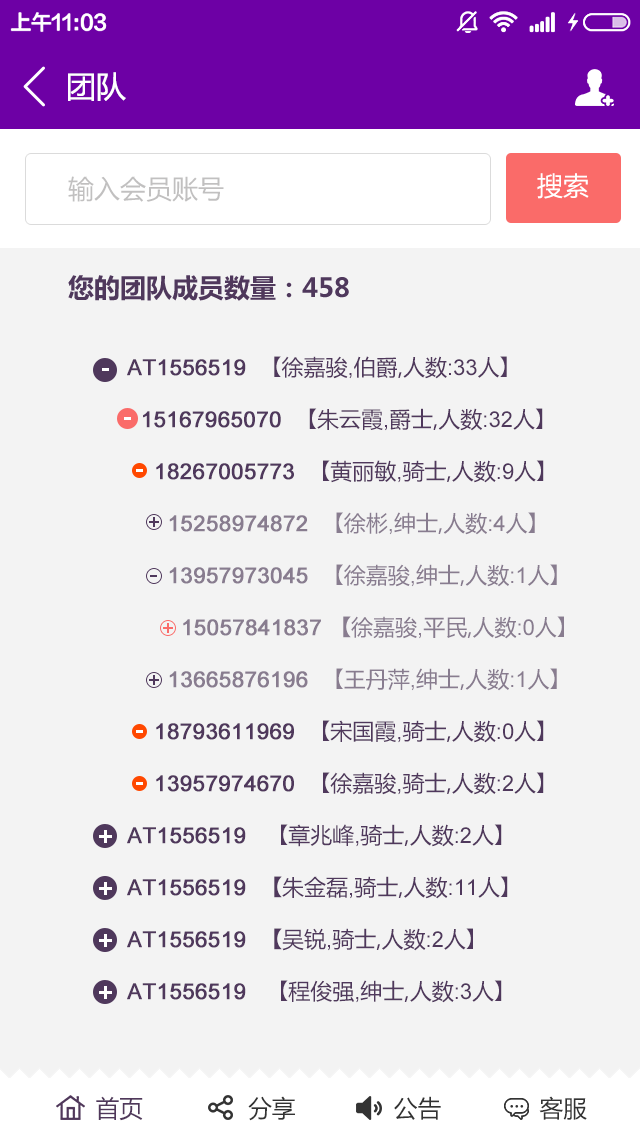
<style>
.page{position:relative;width:640px;height:1136px;background:#f3f3f3}
.page>*{position:absolute;margin:0}
.t1{font:30px "MicrosoftYaHei";color:#ffffff}
.t2{font:26px "MicrosoftYaHei";color:#ffffff}
.t3{font:26px "MicrosoftYaHei";color:#c1c0c0}
.t4{font:26px "Î¢ÈíÑÅºÚ83¹«ÉçÌØ±ð°æ\BBS.83GS.CN-B";color:#4f385c}
.t5{font:22px/52px "ArialMT";color:#4f385c;font-weight:bold}
.t6{font:22px/52px "AdobeHeitiStd-Regular";color:#4f385c}
.t7{font:22px/52px "MicrosoftYaHei";color:#4f385c}
.t8{font:22px/52px "ArialMT";color:#4f385c}
.t9{font:22px/52px "ArialMT";color:#887c8f;font-weight:bold}
.t10{font:22px/52px "AdobeHeitiStd-Regular";color:#887c8f}
.t11{font:22px/52px "MicrosoftYaHei";color:#887c8f}
.t12{font:22px/52px "ArialMT";color:#887c8f}
.t13{font:22px/52px "AdobeHeitiStd-Regular";color:#887c8f;font-weight:bold}
.t14{font:22px/52px "AdobeHeitiStd-Regular";color:#4f385c;font-weight:bold}
.t15{font:22px/43.5px "MicrosoftYaHei";color:#ffffff;font-weight:bold}
.t16{font:22px/51.5px "MicrosoftYaHei";color:#ffffff;font-weight:bold}
.t17{font:20px "MicrosoftYaHei";color:#4f385c;font-weight:bold}
.t18{font:20px "MicrosoftYaHei";color:#fa6b69;font-weight:bold}
.t19{font:24px "MicrosoftYaHei";color:#333333}
.t20{font:24px "MicrosoftYaHei";color:#50385b}
</style>
<div class="page">
<p class="t1" style="left:68px;top:72px;width:58px;height:29px">团队</p>
<p class="t2" style="left:537px;top:173px;width:52px;height:26px">搜索</p>
<p class="t3" style="left:68px;top:176px;width:156px;height:26px">输入会员账号</p>
<p class="t4" style="left:68px;top:275px;width:281px;height:26px">您的团队成员数量：458</p>
<p class="t5" style="left:127px;top:356px;width:437px;height:647px">AT1556519  <span class="t6">【</span><span class="t7">徐嘉骏</span><span class="t8">,</span><span class="t7">伯爵,人数</span><span class="t8">:33</span><span class="t7">人</span><span class="t6">】<br></span>  15167965070  <span class="t6">【</span><span class="t7">朱云霞</span><span class="t8">,</span><span class="t7">爵士,人数</span><span class="t8">:32</span><span class="t7">人</span><span class="t6">】<br></span>    18267005773  <span class="t6">【</span><span class="t7">黄丽敏</span><span class="t8">,</span><span class="t7">骑士,人数</span><span class="t8">:9</span><span class="t7">人</span><span class="t6">】<br>      </span><span class="t9">15258974872  </span><span class="t10">【</span><span class="t11">徐彬</span><span class="t12">,</span><span class="t11">绅士,人数</span><span class="t12">:4</span><span class="t11">人</span><span class="t10">】<br></span><span class="t9">      13957973045  </span><span class="t10">【</span><span class="t11">徐嘉骏</span><span class="t12">,</span><span class="t11">绅士,人数</span><span class="t12">:1</span><span class="t11">人</span><span class="t10">】<br></span><span class="t9">        15057841837 </span><span class="t13">【</span><span class="t11">徐嘉骏</span><span class="t12">,</span><span class="t11">平民,人数</span><span class="t12">:0</span><span class="t11">人</span><span class="t10">】<br></span><span class="t9">      13665876196  </span><span class="t10">【</span><span class="t11">王丹萍</span><span class="t12">,</span><span class="t11">绅士,人数</span><span class="t12">:1</span><span class="t11">人</span><span class="t10">】<br></span>    18793611969  <span class="t6">【</span><span class="t7">宋国霞</span><span class="t8">,</span><span class="t7">骑士,人数</span><span class="t8">:0</span><span class="t7">人</span><span class="t6">】<br></span>    13957974670  <span class="t6">【</span><span class="t7">徐嘉骏</span><span class="t8">,</span><span class="t7">骑士,人数</span><span class="t8">:2</span><span class="t7">人</span><span class="t6">】<br></span>AT1556519   <span class="t6">【</span><span class="t7">章兆峰</span><span class="t8">,</span><span class="t7">骑士,人数</span><span class="t8">:2</span><span class="t7">人</span><span class="t6">】<br></span>AT1556519  <span class="t14">【</span><span class="t7">朱金磊</span><span class="t8">,</span><span class="t7">骑士,人数</span><span class="t8">:11</span><span class="t7">人</span><span class="t6">】<br></span>AT1556519  <span class="t14">【</span><span class="t7">吴锐</span><span class="t8">,</span><span class="t7">骑士,人数</span><span class="t8">:2</span><span class="t7">人</span><span class="t6">】<br></span>AT1556519   <span class="t6">【</span><span class="t7">程俊强</span><span class="t8">,</span><span class="t7">绅士,人数</span><span class="t8">:3</span><span class="t7">人</span><span class="t6">】</span></p>
<p class="t15" style="left:136px;top:469px;width:7px;height:316px">-<br><br><br><br><br><br>-<span class="t16"><br>-</span></p>
<p class="t17" style="left:149px;top:517px;width:10px;height:10px">+</p>
<p class="t18" style="left:163px;top:623px;width:10px;height:10px">+</p>
<p class="t17" style="left:149px;top:675px;width:10px;height:10px">+</p>
<p class="t19" style="left:96px;top:1096px;width:491px;height:25px"><span class="t20">首页</span>               分享              公告              客服</p>
</div>
